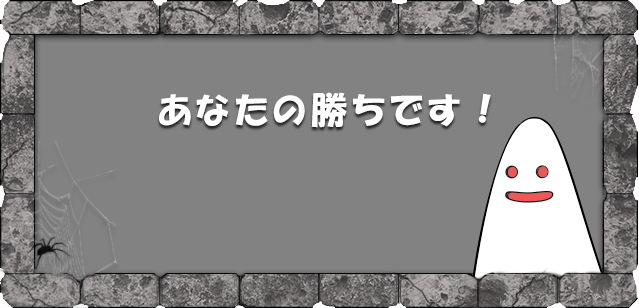
<style>
.page{position:relative;width:639px;height:308px;background:#828282}
.page>*{position:absolute;margin:0}
.t1{font:36px "HGPSoeiKakupoptai";letter-spacing:0.14em;color:#ffffff}
</style>
<div class="page">
<p class="t1" style="left:159px;top:92px;width:332px;height:36px">あなたの勝ちです！</p>
</div>
